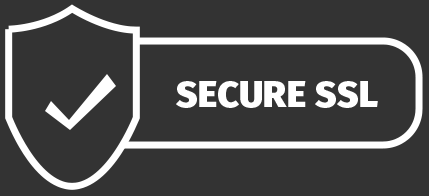
<style>
.page{position:relative;width:429px;height:196px;background:#333333}
.page>*{position:absolute;margin:0}
.t1{font:37.5px "FiraSans-Heavy";color:#ffffff}
</style>
<div class="page">
<p class="t1" style="left:176px;top:81px;width:202px;height:27px">SECURE SSL</p>
</div>
